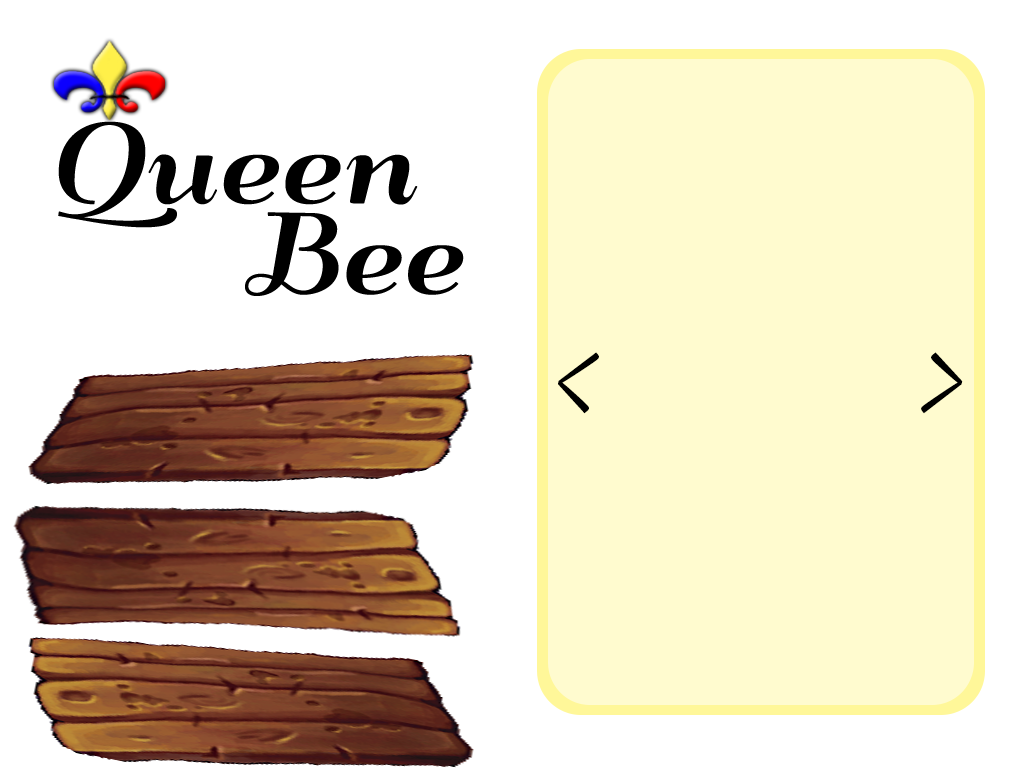
<style>
.page{position:relative;width:1024px;height:768px;background:#ffffff}
.page>*{position:absolute;margin:0}
.t1{font:100px "QumpellkaNo12";color:#000000;font-weight:bold}
</style>
<div class="page">
<p class="t1" style="left:58px;top:121px;width:360px;height:107px">Queen</p>
<p class="t1" style="left:245px;top:212px;width:219px;height:84px">Bee</p>
<p class="t1" style="left:558px;top:352px;width:41px;height:62px">&lt;</p>
<p class="t1" style="left:921px;top:352px;width:42px;height:62px">&gt;</p>
</div>
